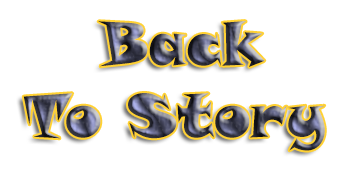
<style>
.page{position:relative;width:344px;height:176px;background:#ffffff}
.page>*{position:absolute;margin:0}
.t1{font:60.1px "SnapITC-Regular"}
</style>
<div class="page">
<p class="t1" style="left:23px;top:21px;width:302px;height:130px">Back<br>To Story</p>
</div>
